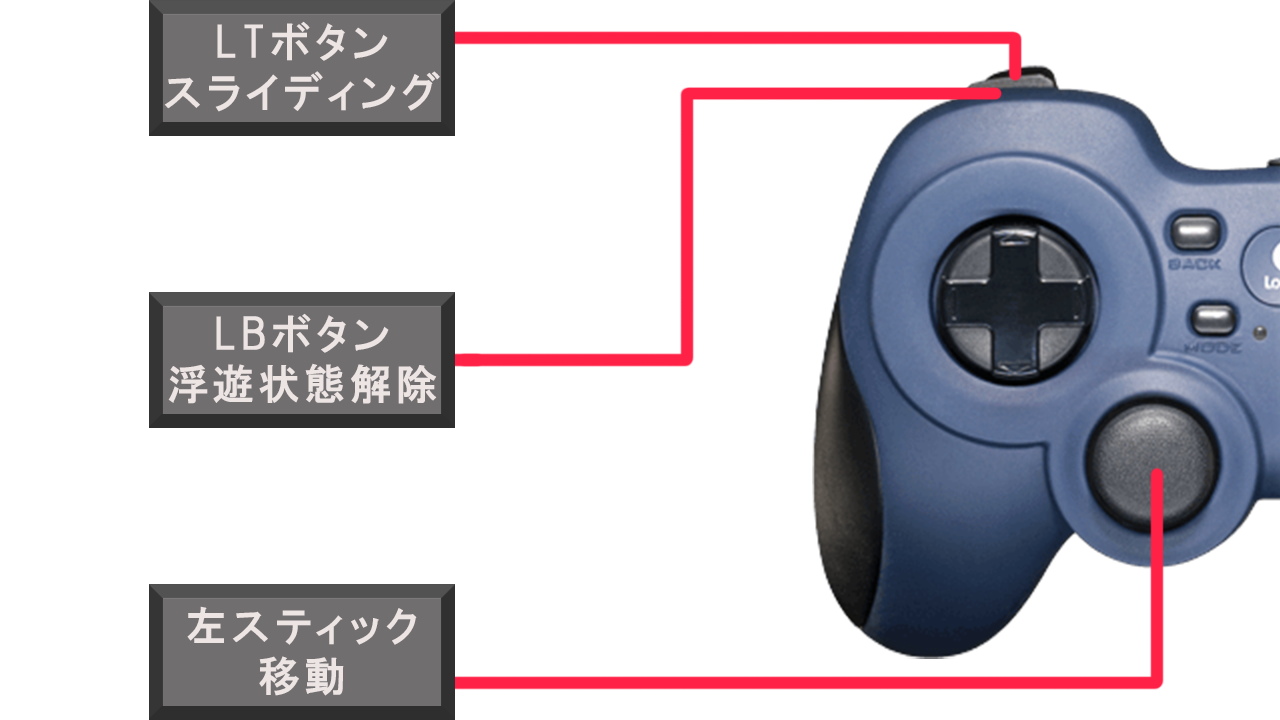
<style>
.page{position:relative;width:1280px;height:720px;background:#ffffff}
.page>*{position:absolute;margin:0}
.t1{font:41.7px/50px "HGPGothicE";letter-spacing:0.1em;color:#ede4e4}
</style>
<div class="page">
<p class="t1" style="left:164px;top:21px;width:276px;height:91px;text-align:center">LTボタン<br>スライディング</p>
<p class="t1" style="left:168px;top:313px;width:269px;height:91px;text-align:center">LBボタン<br>浮遊状態解除</p>
<p class="t1" style="left:187px;top:606px;width:230px;height:90px;text-align:center">左スティック<br>移動</p>
</div>
